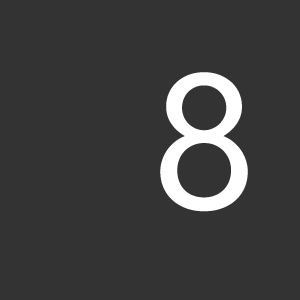
<style>
.page{position:relative;width:300px;height:300px;background:#333333}
.page>*{position:absolute;margin:0}
.t1{font:192px "SegoeUISymbol";color:#ffffff}
</style>
<div class="page">
<p class="t1" style="left:160px;top:72px;width:88px;height:140px">8</p>
</div>
